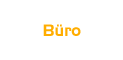
<style>
.page{position:relative;width:123px;height:60px;background:#ffffff}
.page>*{position:absolute;margin:0}
.t1{font:16px "AeroRegularSWFTE";color:#ffad00}
</style>
<div class="page">
<p class="t1" style="left:43px;top:24px;width:38px;height:12px">Büro</p>
</div>
